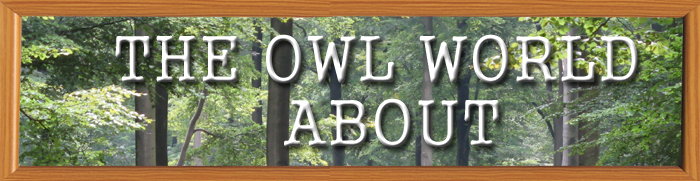
<style>
.page{position:relative;width:700px;height:181px}
.page>*{position:absolute;margin:0}
.t1{font:64.2px "Gungsuh"}
</style>
<div class="page">
<p class="t1" style="left:115px;top:34px;width:523px;height:50px">THE OWL WORLD</p>
<p class="t1" style="left:284px;top:98px;width:215px;height:50px">ABOUT</p>
</div>
